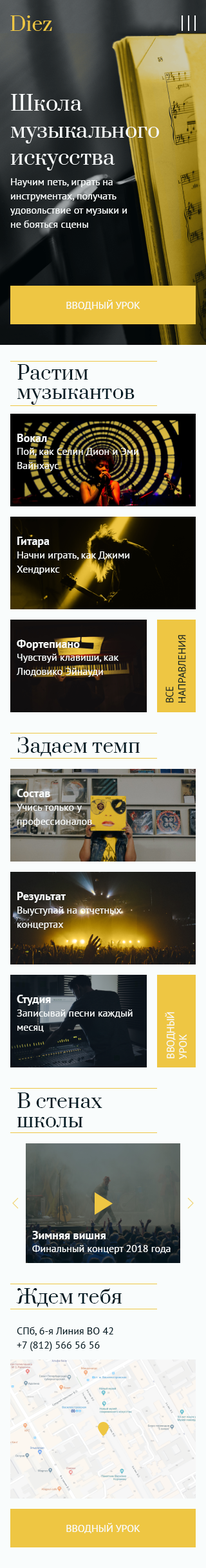
<style>
.page{position:relative;width:206px;height:1568px}
.page>*{position:absolute;margin:0}
.t1{font:19.3px "Prata-Regular";color:#eec643}
.t2{font:20.6px/27px "Prata-Regular";color:#f9fcfc}
.t3{font:10.3px/14.2px "PTSans-Regular";color:#f9fcfc}
.t4{font:10.3px "PTSans-Regular";color:#f9fcfc}
.t5{font:19.3px/19.3px "Prata-Regular";color:#021a23}
.t6{font:11.6px "PTSans-Bold";color:#f9fcfc}
.t7{font:10.3px "PTSans-Regular";color:#021a23}
.t8{font:19.3px "Prata-Regular";color:#021a23}
.t9{font:10.3px/14.2px "PTSans-Regular";color:#021a23}
</style>
<div class="page">
<p class="t1" style="left:10px;top:15px;width:42px;height:16px">Diez</p>
<p class="t2" style="left:10px;top:94px;width:149px;height:77px">Школа музыкального искусства</p>
<p class="t3" style="left:10px;top:178px;width:117px;height:51px">Научим петь, играть на инструментах, получать удовольствие от музыки и не бояться сцены</p>
<p class="t4" style="left:66px;top:300px;width:74px;height:10px">ВВОДНЫЙ УРОК</p>
<p class="t5" style="left:17px;top:364px;width:117px;height:41px">Растим музыкантов</p>
<p class="t6" style="left:17px;top:434px;width:30px;height:8px">Вокал</p>
<p class="t3" style="left:17px;top:448px;width:121px;height:23px">Пой, как Селин Дион и Эми Вайнхаус</p>
<p class="t6" style="left:17px;top:537px;width:33px;height:11px">Гитара</p>
<p class="t3" style="left:17px;top:551px;width:112px;height:24px">Начни играть, как Джими Хендрикс</p>
<p class="t6" style="left:17px;top:640px;width:63px;height:10px">Фортепиано</p>
<p class="t7" style="left:165px;top:635px;width:21px;height:68px;rotate:-90deg">ВСЕ<br>НАПРАВЛЕНИЯ</p>
<p class="t3" style="left:16px;top:654px;width:103px;height:23px">Чувствуй клавиши, как Людовико Эйнауди</p>
<p class="t8" style="left:17px;top:737px;width:123px;height:20px">Задаем темп</p>
<p class="t6" style="left:17px;top:789px;width:33px;height:8px">Состав</p>
<p class="t3" style="left:17px;top:804px;width:75px;height:23px">Учись только у профессионалов</p>
<p class="t6" style="left:17px;top:892px;width:49px;height:11px">Результат</p>
<p class="t3" style="left:17px;top:907px;width:105px;height:23px">Выуступай на отчетных концертах</p>
<p class="t6" style="left:17px;top:995px;width:34px;height:11px">Студия</p>
<p class="t3" style="left:17px;top:1010px;width:116px;height:22px">Записывай песни каждый месяц</p>
<p class="t4" style="left:165px;top:1012px;width:22px;height:47px;rotate:-90deg">ВВОДНЫЙ<br>УРОК</p>
<p class="t5" style="left:17px;top:1093px;width:85px;height:34px">В стенах школы</p>
<p class="t6" style="left:32px;top:1231px;width:74px;height:8px">Зимняя вишня</p>
<p class="t4" style="left:32px;top:1245px;width:139px;height:9px">Финальный концерт 2018 года</p>
<p class="t8" style="left:16px;top:1288px;width:106px;height:19px">Ждем тебя</p>
<p class="t9" style="left:17px;top:1327px;width:96px;height:24px">СПб, 6-я Линия ВО 42<br>+7 (812) 566 56 56</p>
<p class="t4" style="left:66px;top:1523px;width:74px;height:10px">ВВОДНЫЙ УРОК</p>
</div>
